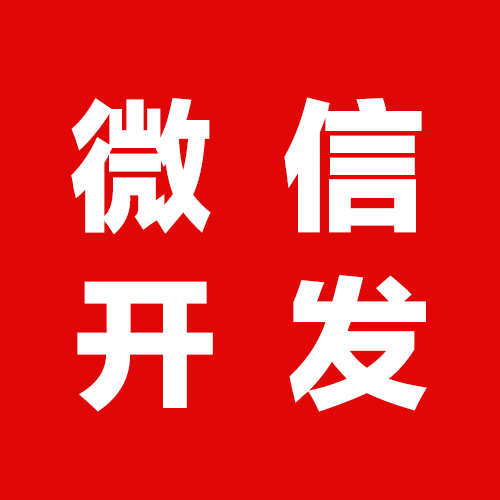
<style>
.page{position:relative;width:500px;height:500px;background:#e20707}
.page>*{position:absolute;margin:0}
.t1{font:144px "FZLTTHK--GBK1-0";letter-spacing:0.1em;color:#ffffff}
</style>
<div class="page">
<p class="t1" style="left:71px;top:97px;width:351px;height:137px">微 信</p>
<p class="t1" style="left:77px;top:275px;width:350px;height:137px">开 发</p>
</div>
